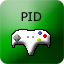
<style>
.page{position:relative;width:64px;height:64px}
.page>*{position:absolute;margin:0}
.t1{font:12px "Verdana";color:#000000}
</style>
<div class="page">
<p class="t1" style="left:21px;top:12px;width:21px;height:9px">PID</p>
</div>
